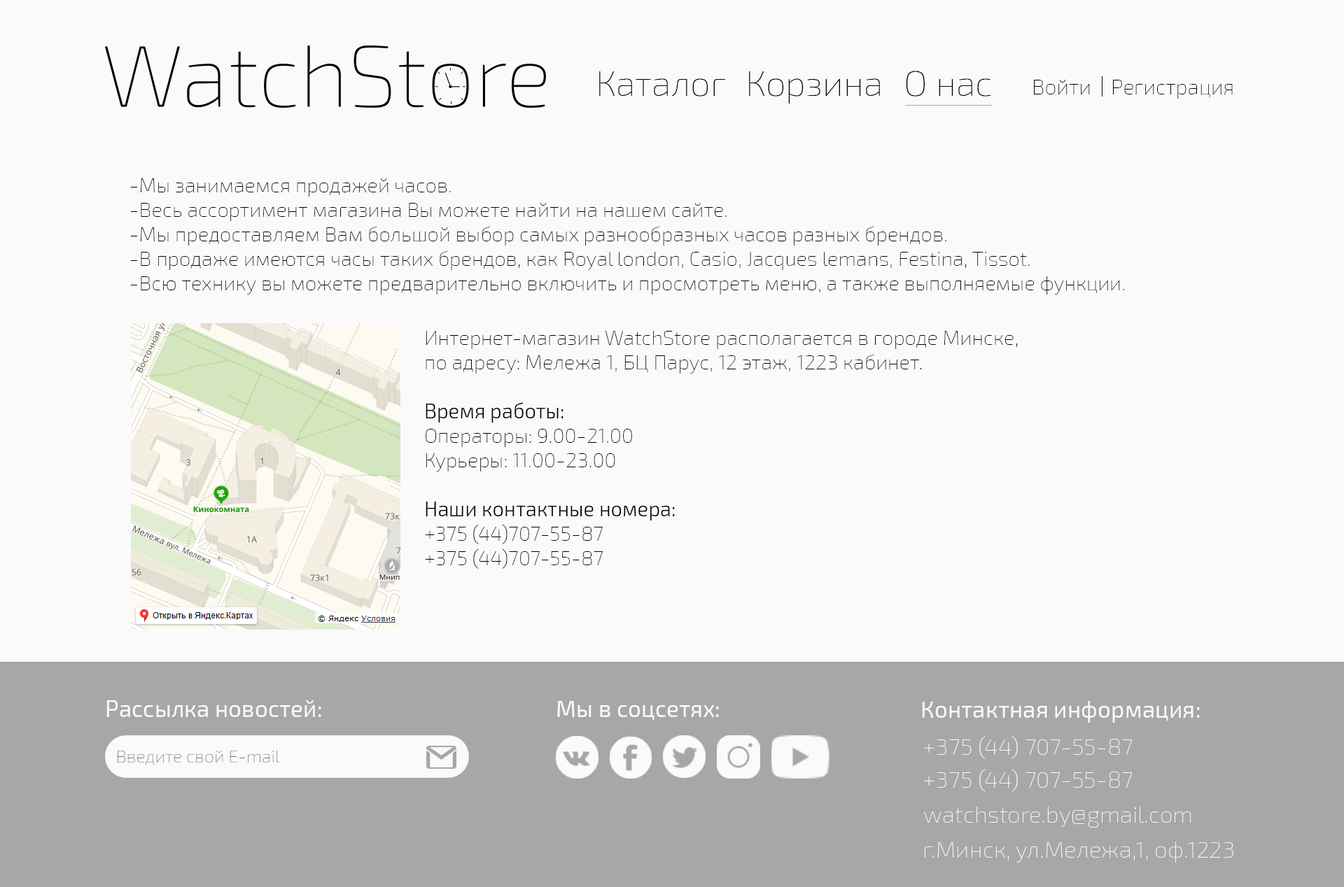
<style>
.page{position:relative;width:1344px;height:887px;background:#fafafa}
.page>*{position:absolute;margin:0}
.t1{font:35.9px "Exo2-Thin";color:#000000}
.t2{font:21.2px "Exo2-Thin";color:#000000}
.t3{font:20.4px "Exo2-Thin";color:#000000}
.t4{font:20.4px "Exo2-Light";color:#000000}
.t5{font:23.3px "Exo2-Regular";color:#fafafa}
.t6{font:23.3px "Exo2-Thin";color:#fafafa}
.t7{font:17.6px "Exo2-Thin";color:#767676}
</style>
<div class="page">
<p class="t1" style="left:599px;top:71px;width:126px;height:26px">Каталог</p>
<p class="t1" style="left:749px;top:71px;width:131px;height:33px">Корзина</p>
<p class="t1" style="left:906px;top:71px;width:85px;height:26px">О нас</p>
<p class="t2" style="left:1034px;top:80px;width:56px;height:14px">Войти</p>
<p class="t2" style="left:1113px;top:80px;width:119px;height:19px">Регистрация</p>
<p class="t3" style="left:130px;top:178px;width:994px;height:117px">-Мы занимаемся продажей часов.<br>-Весь ассортимент магазина Вы можете найти на нашем сайте.<br>-Мы предоставляем Вам большой выбор самых разнообразных часов разных брендов.<br>-В продаже имеются часы таких брендов, как Royal london, Casio, Jacques lemans, Festina, Tissot. <br>-Всю технику вы можете предварительно включить и просмотреть меню, а также выполняемые функции.</p>
<p class="t3" style="left:425px;top:331px;width:593px;height:238px">Интернет-магазин WatchStore располагается в городе Минске, <br>по адресу: Мележа 1, БЦ Парус, 12 этаж, 1223 кабинет.<br><br><span class="t4">Время работы:<br></span>Операторы: 9.00-21.00<br>Курьеры: 11.00-23.00<br><br><span class="t4">Наши контактные номера:<br></span>+375 (44)707-55-87<br>+375 (44)707-55-87</p>
<p class="t5" style="left:106px;top:701px;width:215px;height:16px">Рассылка новостей:</p>
<p class="t5" style="left:557px;top:701px;width:162px;height:20px">Мы в соцсетях:</p>
<p class="t5" style="left:922px;top:701px;width:278px;height:22px">Контактная информация:</p>
<p class="t6" style="left:924px;top:736px;width:208px;height:23px">+375 (44) 707-55-87</p>
<p class="t7" style="left:118px;top:751px;width:162px;height:15px">Введите свой E-mail</p>
<p class="t6" style="left:924px;top:769px;width:208px;height:23px">+375 (44) 707-55-87</p>
<p class="t6" style="left:924px;top:807px;width:267px;height:21px">watchstore.by@gmail.com</p>
<p class="t6" style="left:924px;top:842px;width:309px;height:21px">г.Минск, ул.Мележа,1, оф.1223</p>
</div>
